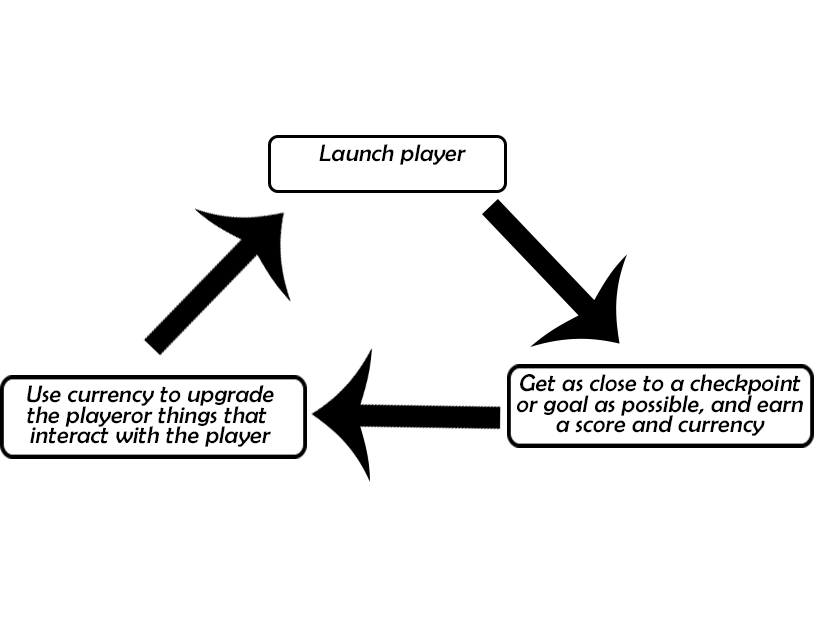
<style>
.page{position:relative;width:826px;height:641px;background:#ffffff}
.page>*{position:absolute;margin:0}
.t1{font:24px "BerlinSansFB-Reg";letter-spacing:0.011em;color:#000000;font-style:italic}
.t2{font:24px/20px "BerlinSansFB-Reg";letter-spacing:0.011em;color:#000000;font-style:italic}
</style>
<div class="page">
<p class="t1" style="left:319px;top:144px;width:147px;height:21px">Launch player</p>
<p class="t2" style="left:517px;top:374px;width:286px;height:62px;text-align:center">Get as close to a checkpoint<br>or goal as possible, and earn<br>a score and currency</p>
<p class="t2" style="left:27px;top:385px;width:247px;height:62px;text-align:center">Use currency to upgrade<br>the playeror things that <br>interact with the player</p>
</div>
